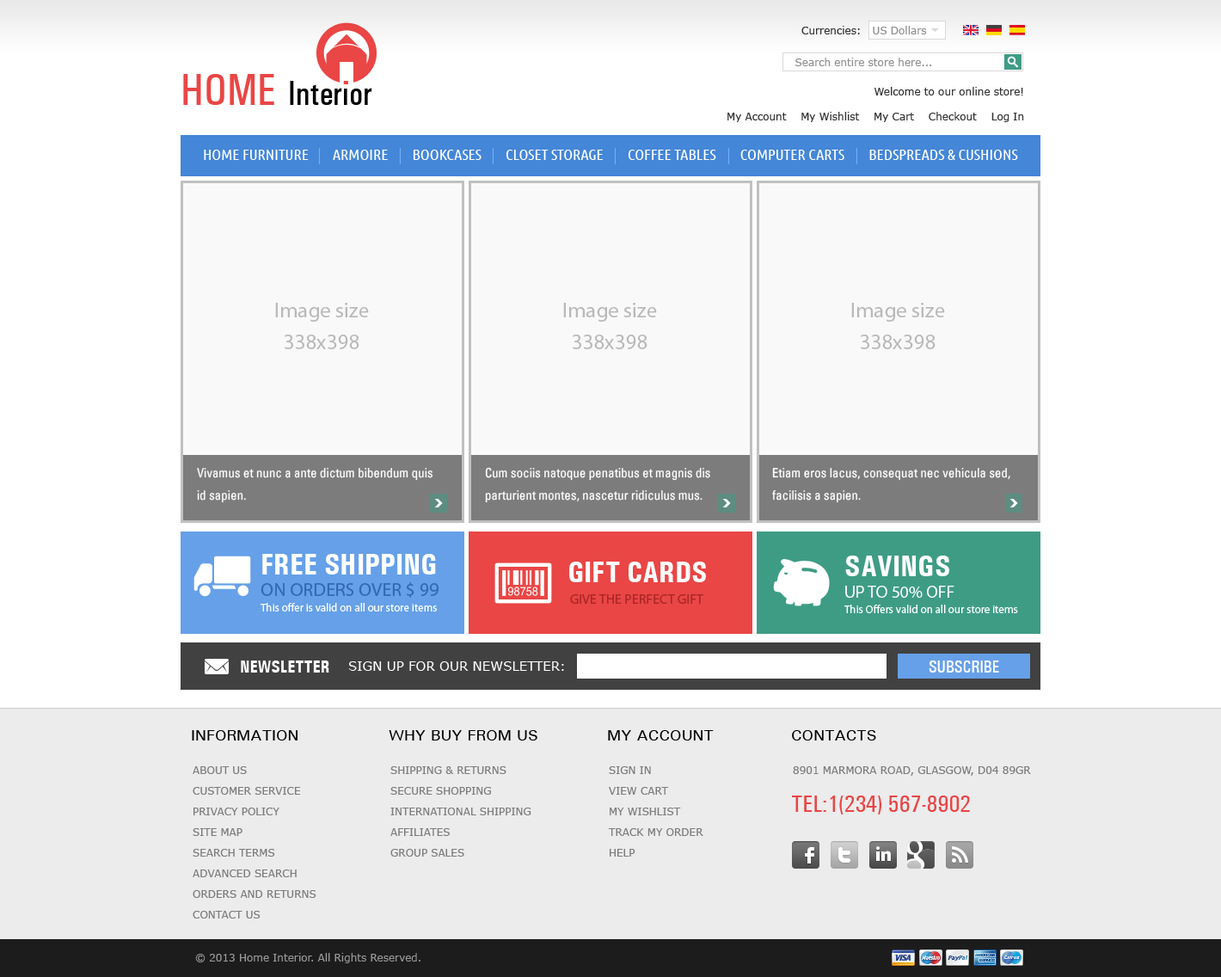
<style>
.page{position:relative;width:1221px;height:977px;background:#ffffff}
.page>*{position:absolute;margin:0}
.t1{font:10.3px "Verdana";color:#333333}
.t2{font:10.3px "Verdana";color:#8f8f8f}
.t3{font:44.7px "Univers-Condensed-Medium";color:#e94645;text-transform:uppercase}
.t4{font:34.4px "Univers-Condensed-Medium";color:#000000}
.t5{font:10.3px/12.4px "Verdana";color:#333333}
.t6{font:15.5px "UbuntuCondensed-Regular";color:#ffffff;text-transform:uppercase}
.t7{font:21.5px/31.6px "MyriadPro-Regular";color:#b9b9b9}
.t8{font:12.9px/22.4px "Univers-Condensed";color:#ffffff}
.t9{font:30.1px "Univers-Condensed-Bold";color:#ffffff}
.t10{font:18.9px "MyriadPro-Regular";color:#3069b0}
.t11{font:17.2px "MyriadPro-Regular";color:#ffffff}
.t12{font:11.2px "MyriadPro-Regular";color:#ffffff}
.t13{font:13.8px "MyriadPro-Regular";color:#aa2625}
.t14{font:17.2px "Univers-Condensed-Bold";color:#ffffff;text-transform:uppercase}
.t15{font:12.9px "Verdana";color:#ffffff;text-transform:uppercase}
.t16{font:17.2px "Univers-Condensed-Medium";color:#ffffff;text-transform:uppercase}
.t17{font:15.5px "Univers-Medium";color:#000000;text-transform:uppercase}
.t18{font:10.3px/20.6px "Verdana";color:#7c7c7c;text-transform:uppercase}
.t19{font:10.3px "Verdana";color:#7c7c7c;text-transform:uppercase}
.t20{font:24.1px "Univers-Condensed-Medium";color:#e94645;text-transform:uppercase}
.t21{font:10.3px "Verdana";color:#999999}
</style>
<div class="page">
<p class="t1" style="left:801px;top:26px;width:59px;height:8px">Currencies:</p>
<p class="t2" style="left:873px;top:26px;width:54px;height:8px">US Dollars</p>
<p class="t2" style="left:795px;top:58px;width:136px;height:8px">Search entire store here...</p>
<p class="t3" style="left:183px;top:74px;width:91px;height:31px">Home</p>
<p class="t4" style="left:290px;top:81px;width:82px;height:24px">Interior</p>
<p class="t5" style="left:727px;top:87px;width:297px;height:35px;text-align:right">Welcome to our online store!<br><br>My Account    My Wishlist    My Cart    Checkout    Log In</p>
<p class="t6" style="left:204px;top:150px;width:814px;height:10px">Home Furniture        Armoire        Bookcases        Closet Storage        Coffee Tables        Computer Carts        Bedspreads &amp; Cushions</p>
<p class="t7" style="left:275px;top:303px;width:94px;height:46px;text-align:center">Image size<br>338x398</p>
<p class="t7" style="left:563px;top:303px;width:94px;height:46px;text-align:center">Image size<br>338x398</p>
<p class="t7" style="left:851px;top:303px;width:94px;height:46px;text-align:center">Image size<br>338x398</p>
<p class="t8" style="left:197px;top:468px;width:235px;height:35px">Vivamus et nunc a ante dictum bibendum quis<br>id sapien.</p>
<p class="t8" style="left:485px;top:467px;width:225px;height:36px">Cum sociis natoque penatibus et magnis dis<br>parturient montes, nascetur ridiculus mus.</p>
<p class="t8" style="left:772px;top:468px;width:238px;height:35px">Etiam eros lacus, consequat nec vehicula sed,<br>facilisis a sapien.</p>
<p class="t9" style="left:262px;top:554px;width:174px;height:20px">FREE SHIPPING</p>
<p class="t9" style="left:845px;top:555px;width:104px;height:21px">SAVINGS</p>
<p class="t9" style="left:569px;top:561px;width:137px;height:21px">GIFT CARDS</p>
<p class="t10" style="left:261px;top:581px;width:177px;height:17px">ON ORDERS OVER $ 99</p>
<p class="t11" style="left:845px;top:586px;width:109px;height:12px">UP TO 50% OFF</p>
<p class="t12" style="left:261px;top:603px;width:176px;height:8px">This offer is valid on all our store items</p>
<p class="t13" style="left:570px;top:594px;width:133px;height:10px">GIVE THE PERFECT GIFT</p>
<p class="t12" style="left:844px;top:604px;width:174px;height:9px">This Offers valid on all our store items</p>
<p class="t14" style="left:241px;top:660px;width:88px;height:12px">Newsletter</p>
<p class="t15" style="left:348px;top:661px;width:216px;height:10px">Sign up for our newsletter:</p>
<p class="t16" style="left:929px;top:660px;width:70px;height:12px">Subscribe</p>
<p class="t17" style="left:192px;top:730px;width:105px;height:10px">Information</p>
<p class="t17" style="left:389px;top:730px;width:148px;height:10px">Why buy from us</p>
<p class="t17" style="left:608px;top:730px;width:106px;height:10px">My account</p>
<p class="t17" style="left:792px;top:730px;width:84px;height:10px">Contacts</p>
<p class="t18" style="left:193px;top:766px;width:123px;height:152px">About Us<br>Customer Service<br>Privacy Policy<br>Site Map<br>Search Terms<br>Advanced Search<br>Orders and Returns<br>Contact Us</p>
<p class="t18" style="left:390px;top:766px;width:141px;height:90px">Shipping &amp; Returns<br>Secure Shopping<br>International Shipping<br>Affiliates<br>Group Sales</p>
<p class="t18" style="left:608px;top:766px;width:95px;height:90px">Sign In<br>View Cart<br>My Wishlist<br>Track My Order<br>Help</p>
<p class="t19" style="left:793px;top:766px;width:238px;height:10px">8901 Marmora Road, Glasgow, D04 89GR</p>
<p class="t20" style="left:792px;top:795px;width:178px;height:19px">Tel:1(234) 567-8902</p>
<p class="t21" style="left:195px;top:953px;width:225px;height:10px">© 2013 Home Interior. All Rights Reserved.</p>
</div>
